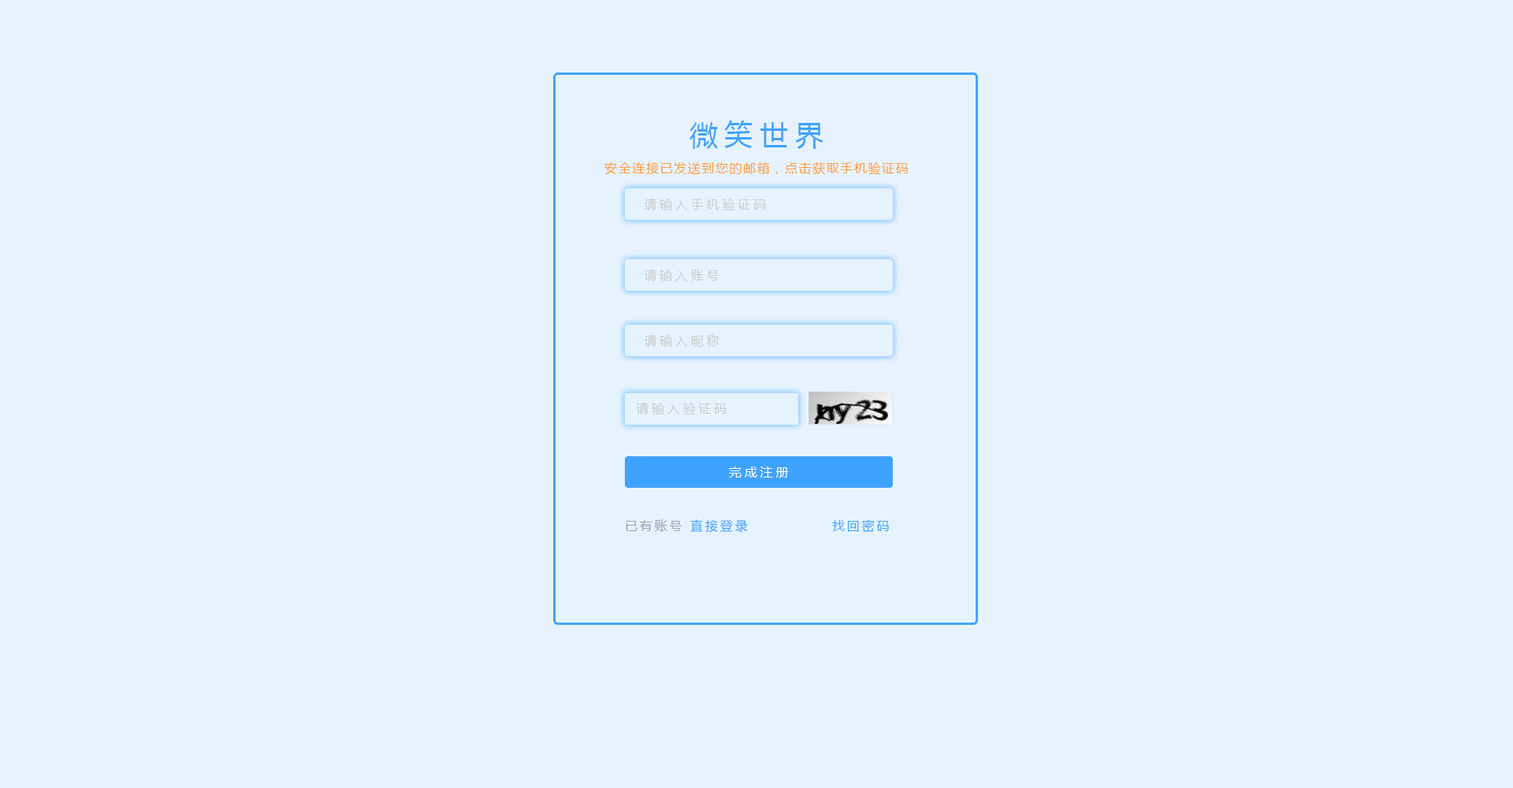
<style>
.page{position:relative;width:1513px;height:788px;background:#e6f3ff}
.page>*{position:absolute;margin:0}
.t1{font:28.4px "MicrosoftYaHei";letter-spacing:0.24em;color:#3ea2ff}
.t2{font:12.6px "MicrosoftYaHei";letter-spacing:0.1em;color:#ff9d3e}
.t3{font:12.6px "MicrosoftYaHei";letter-spacing:0.24em;color:#cccccc}
.t4{font:12.6px "MicrosoftYaHei";letter-spacing:0.24em;color:#ffffff}
.t5{font:12.6px "MicrosoftYaHei";letter-spacing:0.18em;color:#9fa3b0}
.t6{font:12.6px "MicrosoftYaHei";letter-spacing:0.18em;color:#3ea2ff}
</style>
<div class="page">
<p class="t1" style="left:690px;top:121px;width:134px;height:28px">微笑世界</p>
<p class="t2" style="left:604px;top:162px;width:305px;height:13px">安全连接已发送到您的邮箱，点击获取手机验证码</p>
<p class="t3" style="left:644px;top:198px;width:122px;height:13px">请输入手机验证码</p>
<p class="t3" style="left:644px;top:269px;width:76px;height:13px">请输入账号</p>
<p class="t3" style="left:644px;top:334px;width:76px;height:14px">请输入昵称</p>
<p class="t3" style="left:636px;top:402px;width:91px;height:13px">请输入验证码</p>
<p class="t4" style="left:729px;top:467px;width:60px;height:11px">完成注册</p>
<p class="t5" style="left:626px;top:519px;width:122px;height:13px">已有账号 <span class="t6">直接登录</span></p>
<p class="t6" style="left:832px;top:519px;width:57px;height:13px">找回密码</p>
</div>
